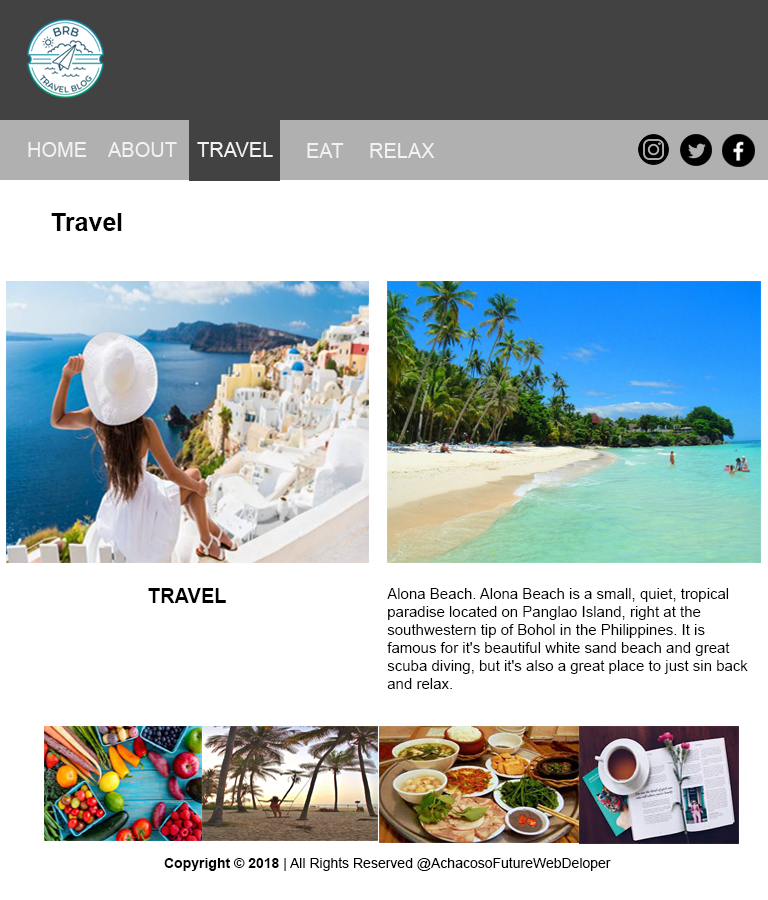
<style>
.page{position:relative;width:768px;height:900px;background:#ffffff}
.page>*{position:absolute;margin:0}
.t1{font:20px "ArialMT";color:#f2f2f3}
.t2{font:25px "Arial-BoldMT";color:#000000}
.t3{font:20px "Arial-BoldMT";color:#000000}
.t4{font:15px "ArialMT";color:#000000}
.t5{font:14px "ArialMT";color:#000000}
.t6{font:14px "Arial-BoldMT";color:#000000}
</style>
<div class="page">
<p class="t1" style="left:28px;top:142px;width:59px;height:15px">HOME</p>
<p class="t1" style="left:108px;top:142px;width:69px;height:15px">ABOUT</p>
<p class="t1" style="left:197px;top:142px;width:76px;height:15px">TRAVEL</p>
<p class="t1" style="left:307px;top:143px;width:37px;height:15px">EAT</p>
<p class="t1" style="left:370px;top:143px;width:65px;height:15px">RELAX</p>
<p class="t2" style="left:51px;top:213px;width:71px;height:18px">Travel</p>
<p class="t3" style="left:148px;top:588px;width:78px;height:15px">TRAVEL</p>
<p class="t4" style="left:387px;top:588px;width:361px;height:101px">Alona Beach. Alona Beach is a small, quiet, tropical paradise located on Panglao Island, right at the southwestern tip of Bohol in the Philippines. It is famous for it's beautiful white sand beach and great scuba diving, but it's also a great place to just sin back and relax.</p>
<p class="t5" style="left:164px;top:857px;width:447px;height:14px"><span class="t6">Copyright © 2018 </span>| All Rights Reserved @AchacosoFutureWebDeloper</p>
</div>
